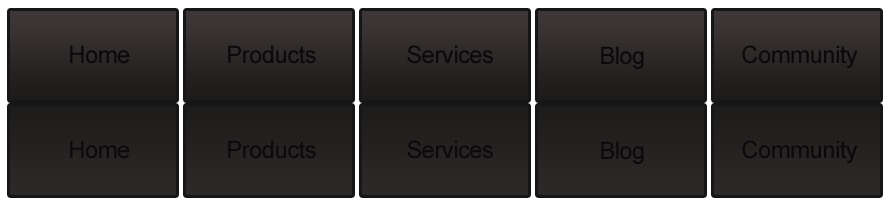
<style>
.page{position:relative;width:893px;height:222px}
.page>*{position:absolute;margin:0}
.t1{font:24px "ArialMT";letter-spacing:-0.025em;color:#0b0909}
</style>
<div class="page">
<p class="t1" style="left:70px;top:45px;width:60px;height:19px">Home</p>
<p class="t1" style="left:228px;top:45px;width:88px;height:19px">Products</p>
<p class="t1" style="left:407px;top:45px;width:86px;height:19px">Services</p>
<p class="t1" style="left:601px;top:46px;width:43px;height:23px">Blog</p>
<p class="t1" style="left:742px;top:45px;width:116px;height:23px">Community</p>
<p class="t1" style="left:70px;top:140px;width:60px;height:19px">Home</p>
<p class="t1" style="left:228px;top:140px;width:88px;height:19px">Products</p>
<p class="t1" style="left:407px;top:140px;width:86px;height:19px">Services</p>
<p class="t1" style="left:601px;top:141px;width:43px;height:23px">Blog</p>
<p class="t1" style="left:742px;top:140px;width:116px;height:23px">Community</p>
</div>
